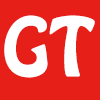
<style>
.page{position:relative;width:100px;height:100px;background:#e71f19}
.page>*{position:absolute;margin:0}
.t1{font:72px "HoboStd";color:#ffffff}
</style>
<div class="page">
<p class="t1" style="left:4px;top:15px;width:91px;height:63px">GT</p>
</div>
